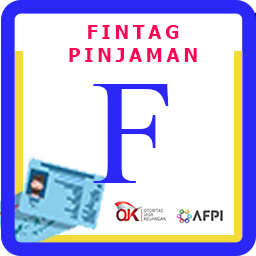
<style>
.page{position:relative;width:256px;height:256px;background:#ffffff}
.page>*{position:absolute;margin:0}
.t1{font:19px "Tahoma-Bold";letter-spacing:0.2em;color:#ff0557}
.t2{font:150px "TimesNewRomanPSMT";letter-spacing:0.2em;color:#2c27f9}
</style>
<div class="page">
<p class="t1" style="left:69px;top:25px;width:128px;height:37px;text-align:center">FINTAG<br>PINJAMAN</p>
<p class="t2" style="left:93px;top:84px;width:76px;height:99px">F</p>
</div>
